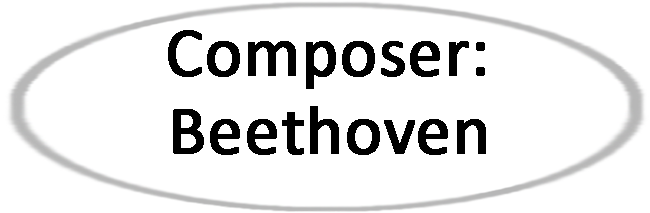
<style>
.page{position:relative;width:650px;height:213px;background:#ffffff}
.page>*{position:absolute;margin:0}
.t1{font:70px "Calibri";color:#000000;font-weight:bold}
</style>
<div class="page">
<p class="t1" style="left:168px;top:30px;width:317px;height:59px">Composer:</p>
<p class="t1" style="left:173px;top:106px;width:313px;height:49px">Beethoven</p>
</div>
